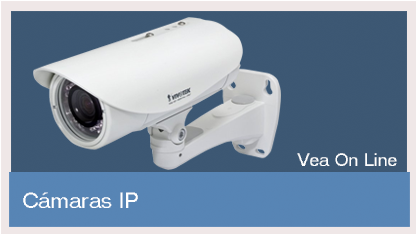
<style>
.page{position:relative;width:416px;height:234px}
.page>*{position:absolute;margin:0}
.t1{font:17.6px "MS Sans Serif";color:#ffffff}
.t2{font:21.5px "MS Sans Serif";color:#ffffff}
</style>
<div class="page">
<p class="t1" style="left:297px;top:153px;width:100px;height:13px">Vea On Line</p>
<p class="t2" style="left:23px;top:192px;width:115px;height:16px">Cámaras IP</p>
</div>
